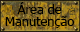
<style>
.page{position:relative;width:80px;height:32px}
.page>*{position:absolute;margin:0}
.t1{font:11.7px/12.2px "Tahoma";color:#000000;scale:1.11 1}
.t2{font:11.7px/15.2px "Tahoma";color:#000000;scale:1.11 1}
</style>
<div class="page">
<p class="t1" style="left:5px;top:2px;width:70px;height:26px;text-align:center"><span class="t2">Área de<br></span>Manutenção</p>
</div>
